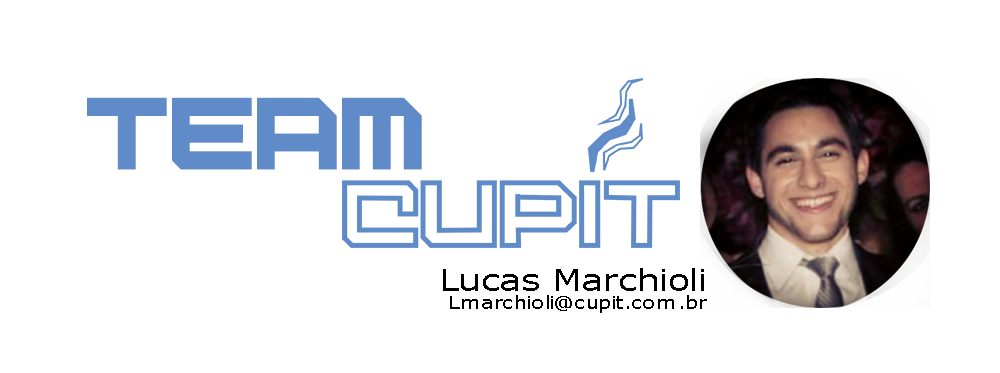
<style>
.page{position:relative;width:1000px;height:373px;background:#ffffff}
.page>*{position:absolute;margin:0}
.t1{font:71.3px "Digital-Desolation";letter-spacing:-0.05em;color:#5f8cc9}
.t2{font:18px/18px "Verdana";color:#000000;scale:1.19 1}
.t3{font:30px/18px "Verdana";color:#000000;scale:1.19 1}
</style>
<div class="page">
<p class="t1" style="left:87px;top:97px;width:335px;height:73px">Team</p>
<p class="t2" style="left:443px;top:268px;width:264px;height:45px;text-align:right"><span class="t3">Lucas Marchioli<br></span>Lmarchioli@cupit.com.br</p>
</div>
